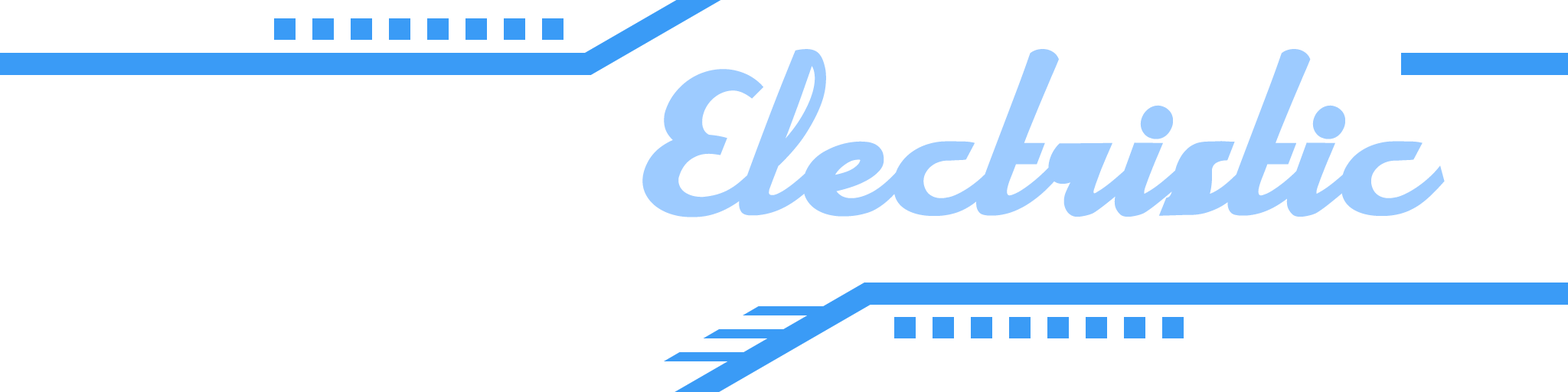
<style>
.page{position:relative;width:1568px;height:392px;background:#ffffff}
.page>*{position:absolute;margin:0}
.t1{font:153.1px "ElectricityPersonalUse-Regular";color:#9dcbff}
</style>
<div class="page">
<p class="t1" style="left:642px;top:49px;width:803px;height:168px">Electristic</p>
</div>
